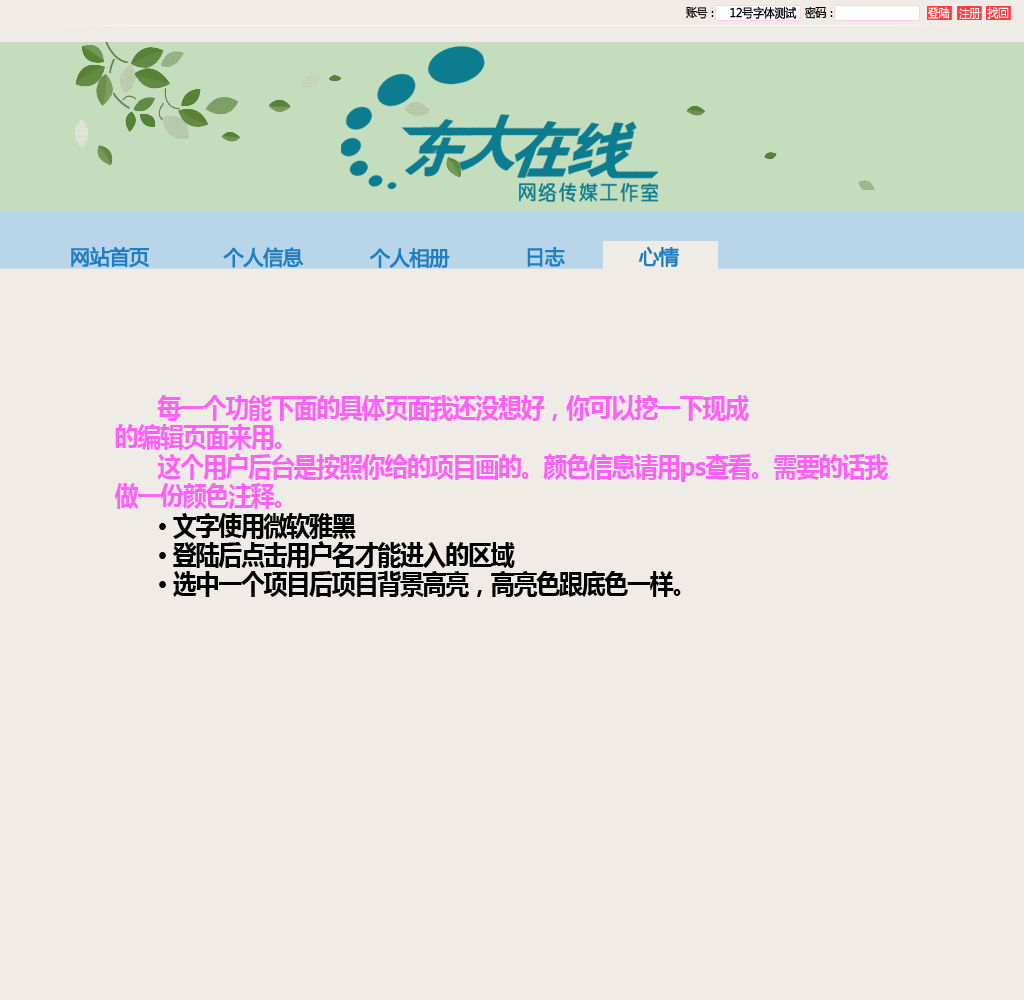
<style>
.page{position:relative;width:1024px;height:1000px;background:#efece7}
.page>*{position:absolute;margin:0}
.t1{font:12px "MicrosoftYaHei";letter-spacing:-0.04em;color:#000000;font-weight:bold;scale:0.91 1}
.t2{font:12px "MicrosoftYaHei";letter-spacing:-0.04em;color:#000000;scale:0.91 1}
.t3{font:20px "MicrosoftYaHei";letter-spacing:-0.04em;color:#217ec1;font-weight:bold}
.t4{font:26px/29.4px "MicrosoftYaHei-Bold";letter-spacing:-0.04em;color:#ff61f6;scale:0.91 1}
.t5{font:26px/29.4px "MicrosoftYaHei-Bold";letter-spacing:-0.04em;color:#000000;scale:0.91 1}
</style>
<div class="page">
<p class="t1" style="left:730px;top:6px;width:67px;height:13px">12号字体测试</p>
<p class="t2" style="left:686px;top:7px;width:28px;height:12px">账号：</p>
<p class="t2" style="left:805px;top:7px;width:28px;height:12px">密码：</p>
<p class="t3" style="left:71px;top:246px;width:78px;height:22px">网站首页</p>
<p class="t3" style="left:638px;top:246px;width:41px;height:21px">心情</p>
<p class="t3" style="left:223px;top:247px;width:81px;height:21px">个人信息</p>
<p class="t3" style="left:370px;top:248px;width:80px;height:20px">个人相册</p>
<p class="t3" style="left:527px;top:247px;width:38px;height:20px">日志</p>
<p class="t4" style="left:115px;top:395px;width:773px;height:202px">每一个功能下面的具体页面我还没想好，你可以挖一下现成<br>的编辑页面来用。<br>       这个用户后台是按照你给的项目画的。颜色信息请用ps查看。需要的话我<br>做一份颜色注释。<br>       <span class="t5">· 文字使用微软雅黑<br>       · 登陆后点击用户名才能进入的区域<br>       · 选中一个项目后项目背景高亮，高亮色跟底色一样。</span></p>
</div>
